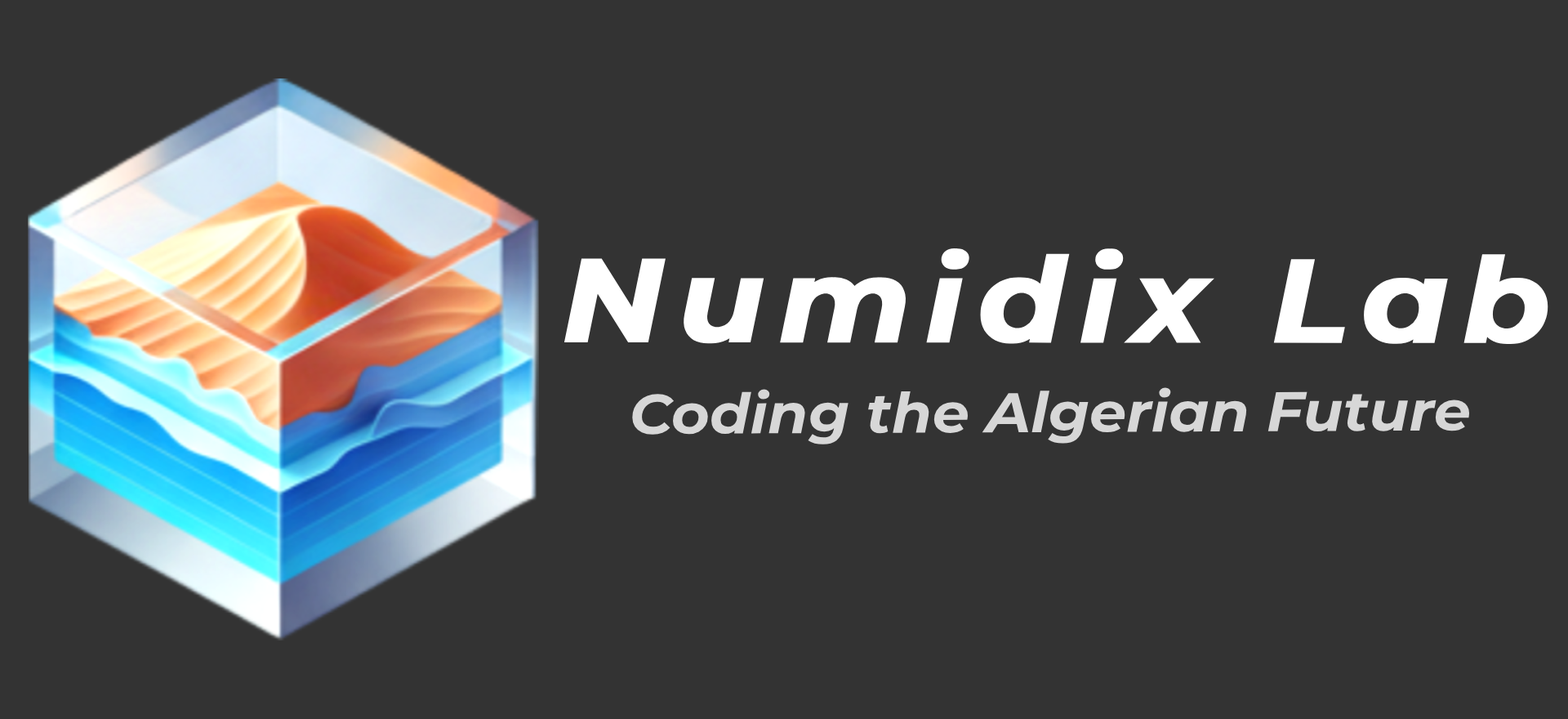
<style>
.page{position:relative;width:1568px;height:719px;background:#333333}
.page>*{position:absolute;margin:0}
.t1{font:119.5px "Montserrat-BoldItalic";letter-spacing:0.09em;color:#ffffff;font-weight:bold;scale:1.05 1}
.t2{font:55.8px "Montserrat-BoldItalic";color:#d7d7d7;scale:1.05 1}
</style>
<div class="page">
<p class="t1" style="left:564px;top:248px;width:984px;height:96px">Numidix Lab</p>
<p class="t2" style="left:632px;top:387px;width:838px;height:57px">Coding the Algerian Future</p>
</div>
